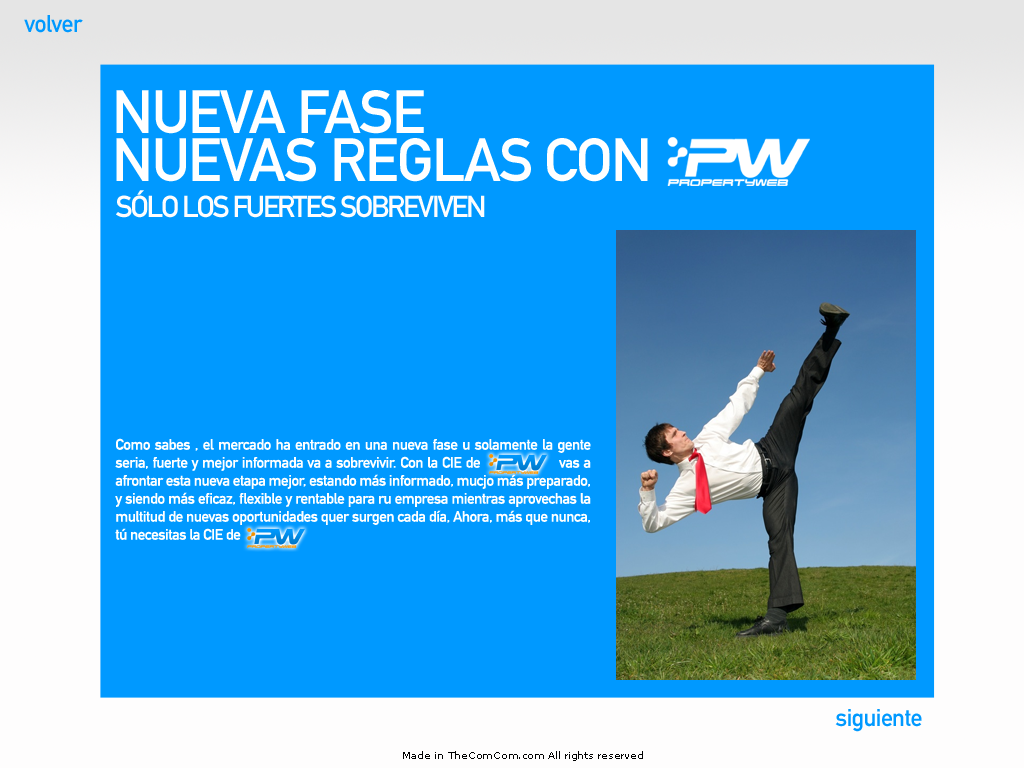
<style>
.page{position:relative;width:1024px;height:768px;background:#0099ff}
.page>*{position:absolute;margin:0}
.t1{font:24px "DINMittelschriftStd";letter-spacing:-0.025em;color:#0099ff}
.t2{font:60px/48px "DINMittelschriftStd";letter-spacing:-0.025em;color:#ffffff;text-transform:uppercase}
.t3{font:30px "DINMittelschriftStd";letter-spacing:-0.075em;color:#fefdfd}
.t4{font:15px "DINMittelschriftStd";letter-spacing:-0.025em;color:#ffffff}
.t5{font:10px "MSReferenceSansSerif";letter-spacing:-0.025em;color:#010101}
</style>
<div class="page">
<p class="t1" style="left:24px;top:15px;width:59px;height:18px">volver</p>
<p class="t2" style="left:116px;top:90px;width:532px;height:92px">nueva fase<br>nuevas reglas con</p>
<p class="t3" style="left:116px;top:190px;width:369px;height:28px">SÓLO LOS FUERTES SOBREVIVEN</p>
<p class="t4" style="left:115px;top:438px;width:476px;height:102px;text-align:justify">Como sabes , el mercado ha entrado en una nueva fase u solamente la gente seria, fuerte y mejor informada va a sobrevivir. Con la CIE de                   vas a afrontar esta nueva etapa mejor, estando más informado, mucjo más preparado, y siendo más eficaz, flexible y rentable para ru empresa mientras aprovechas la multitud de nuevas oportunidades quer surgen cada día, Ahora, más que nunca, tú necesitas la CIE de</p>
<p class="t1" style="left:835px;top:709px;width:87px;height:23px">siguiente</p>
<p class="t5" style="left:403px;top:751px;width:240px;height:10px">Made in TheComCom.com All rights reserved</p>
</div>
